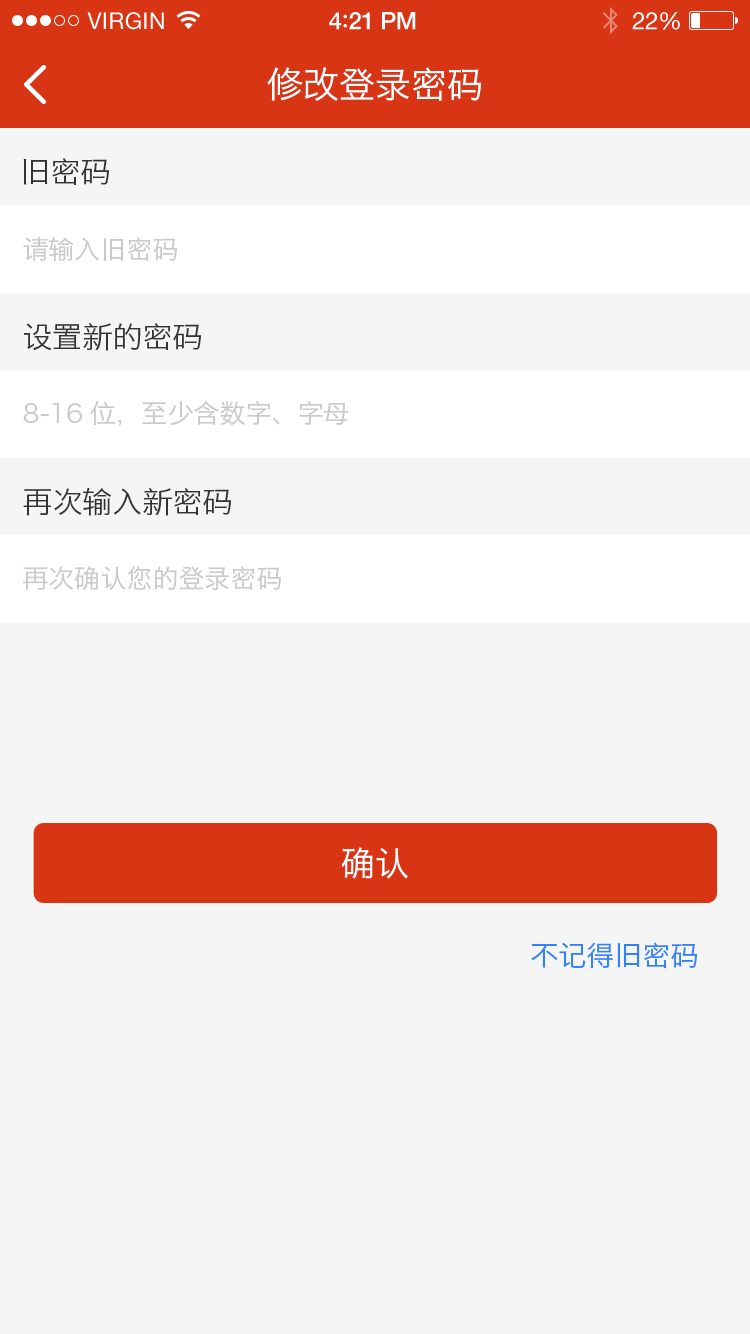
<style>
.page{position:relative;width:750px;height:1334px;background:#f5f5f5}
.page>*{position:absolute;margin:0}
.t1{font:23px "HelveticaNeue";letter-spacing:0.02em;color:#ffffff}
.t2{font:24px "HelveticaNeue-Medium";letter-spacing:-0.02em;color:#ffffff}
.t3{font:26px "Avenir-Medium";letter-spacing:-0.02em;color:#ffffff}
.t4{font:24px "HelveticaNeue";letter-spacing:-0.02em;color:#ffffff}
.t5{font:36px "HiraginoSansGB-W3";color:#ffffff}
.t6{font:30px "HiraginoSansGB-W3";color:#333333}
.t7{font:26px "HiraginoSansGB-W3";color:#cacaca}
.t8{font:34px "HiraginoSansGB-W3";color:#ffffff}
.t9{font:28px "HiraginoSansGB-W3";color:#2f81fd}
</style>
<div class="page">
<p class="t1" style="left:87px;top:12px;width:77px;height:18px">VIRGIN</p>
<p class="t2" style="left:329px;top:12px;width:87px;height:18px">4<span class="t3">:</span>21 PM</p>
<p class="t4" style="left:632px;top:12px;width:48px;height:18px">22%</p>
<p class="t5" style="left:267px;top:67px;width:215px;height:34px">修改登录密码</p>
<p class="t6" style="left:23px;top:158px;width:86px;height:27px">旧密码</p>
<p class="t7" style="left:23px;top:237px;width:154px;height:24px">请输入旧密码</p>
<p class="t6" style="left:24px;top:323px;width:177px;height:28px">设置新的密码</p>
<p class="t7" style="left:23px;top:400px;width:326px;height:26px">8-16位，至少含数字、字母</p>
<p class="t6" style="left:23px;top:487px;width:208px;height:29px">再次输入新密码</p>
<p class="t7" style="left:23px;top:566px;width:258px;height:24px">再次确认您的登录密码</p>
<p class="t8" style="left:341px;top:847px;width:67px;height:32px">确认</p>
<p class="t9" style="left:531px;top:942px;width:167px;height:27px">不记得旧密码</p>
</div>
